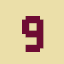
<style>
.page{position:relative;width:64px;height:64px;background:#ebdfa9}
.page>*{position:absolute;margin:0}
.t1{font:72px "MiniPixel-7";color:#6e0c33}
</style>
<div class="page">
<p class="t1" style="left:22px;top:16px;width:22px;height:36px">9</p>
</div>
